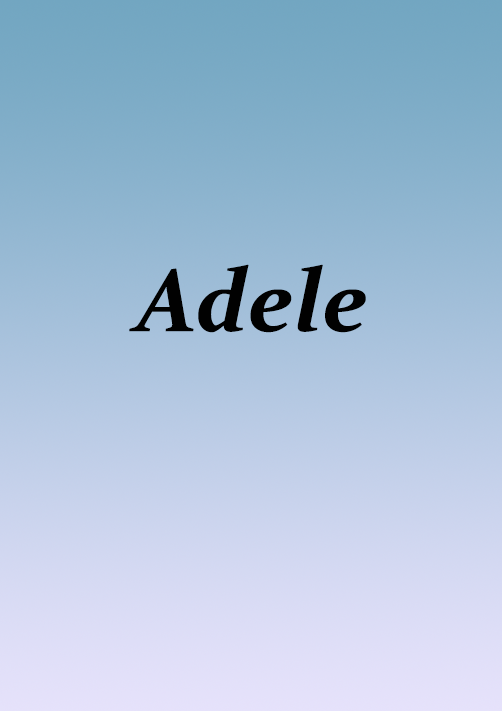
<style>
.page{position:relative;width:502px;height:711px}
.page>*{position:absolute;margin:0}
.t1{font:90px "Constantia-BoldItalic";color:#010101}
</style>
<div class="page">
<p class="t1" style="left:129px;top:264px;width:237px;height:69px">Adele</p>
</div>
